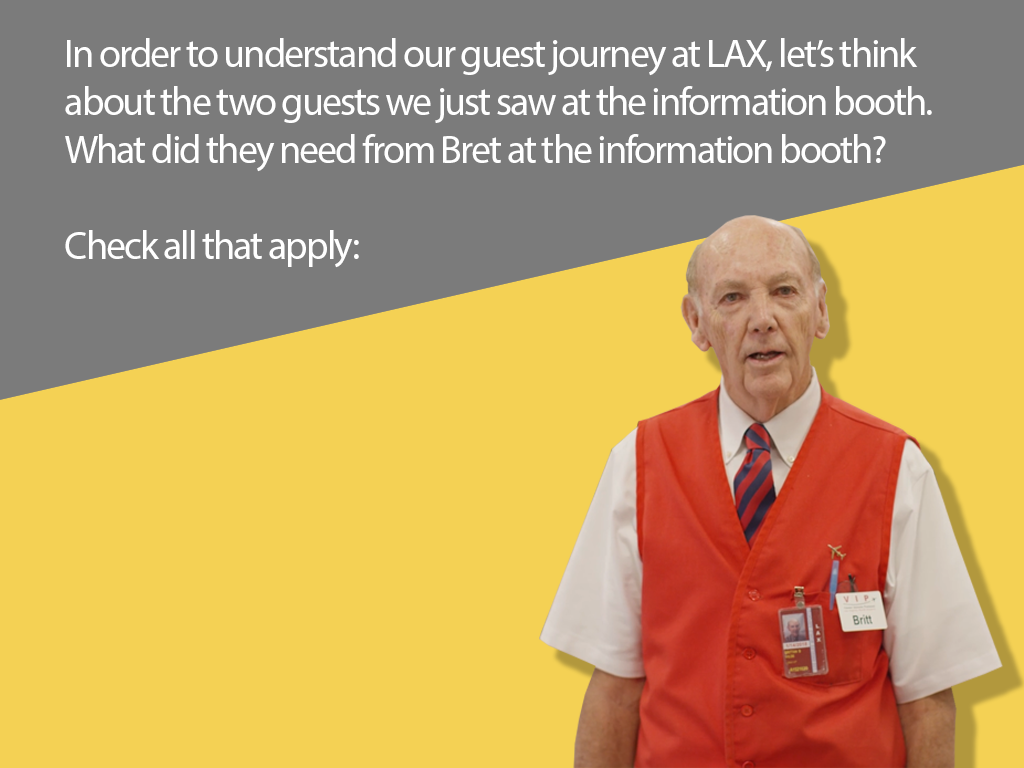
<style>
.page{position:relative;width:1024px;height:768px;background:#f4d154}
.page>*{position:absolute;margin:0}
.t1{font:40px/48px "MyriadPro-Regular";letter-spacing:-0.05em;color:#ffffff}
</style>
<div class="page">
<p class="t1" style="left:65px;top:38px;width:867px;height:230px">In order to understand our guest journey at LAX, let’s think about the two guests we just saw at the information booth. What did they need from Bret at the information booth?<br><br>Check all that apply:</p>
</div>
